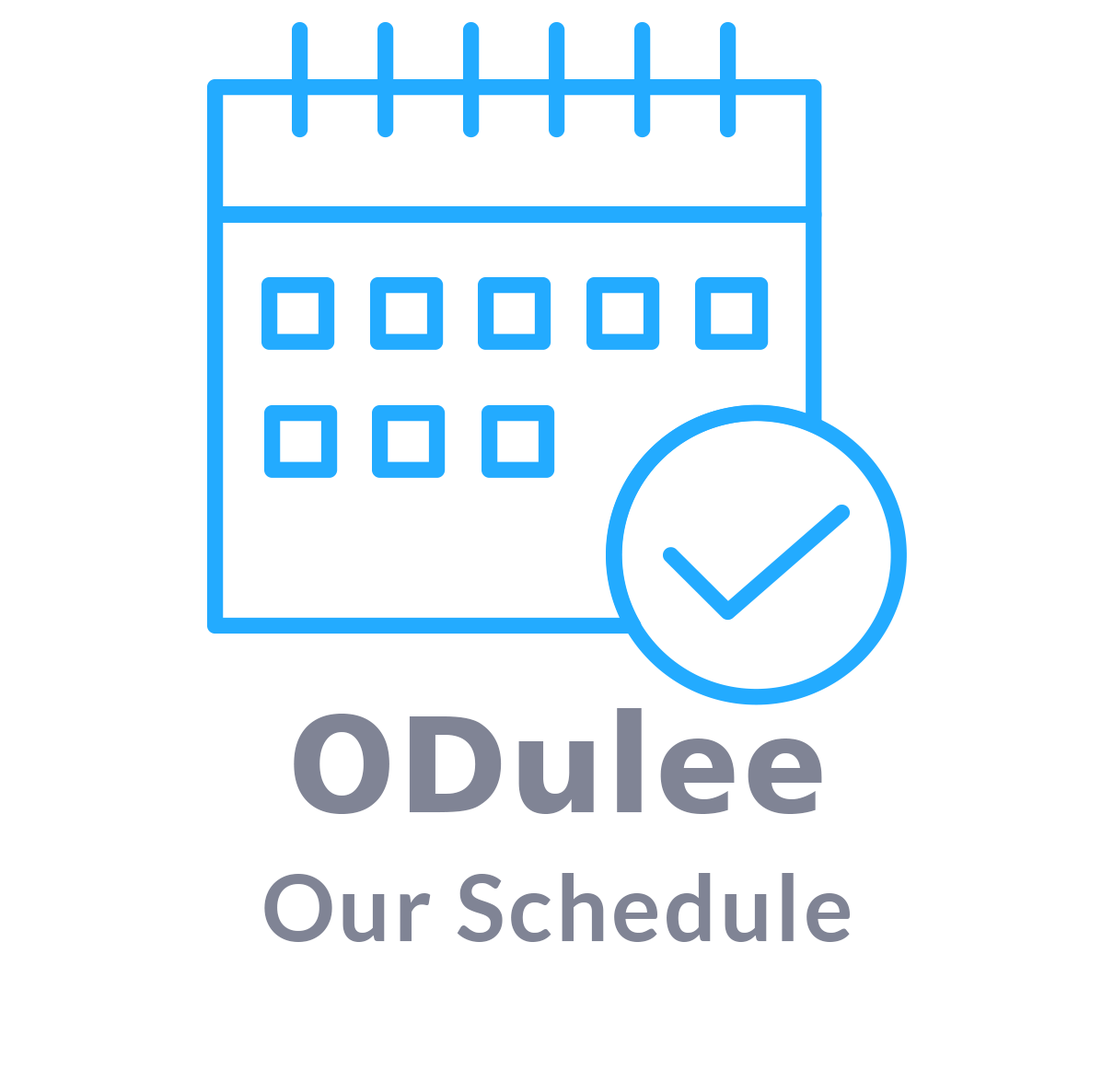
<style>
.page{position:relative;width:1114px;height:1070px;background:#ffffff}
.page>*{position:absolute;margin:0}
.t1{font:138.1px "Humanist777BT-BlackB";letter-spacing:0.035em;color:#808495}
.t2{font:92.1px "Lato-Bold";letter-spacing:0.035em;color:#808495}
</style>
<div class="page">
<p class="t1" style="left:294px;top:708px;width:528px;height:106px">ODulee</p>
<p class="t2" style="left:264px;top:873px;width:586px;height:69px">Our Schedule</p>
</div>
